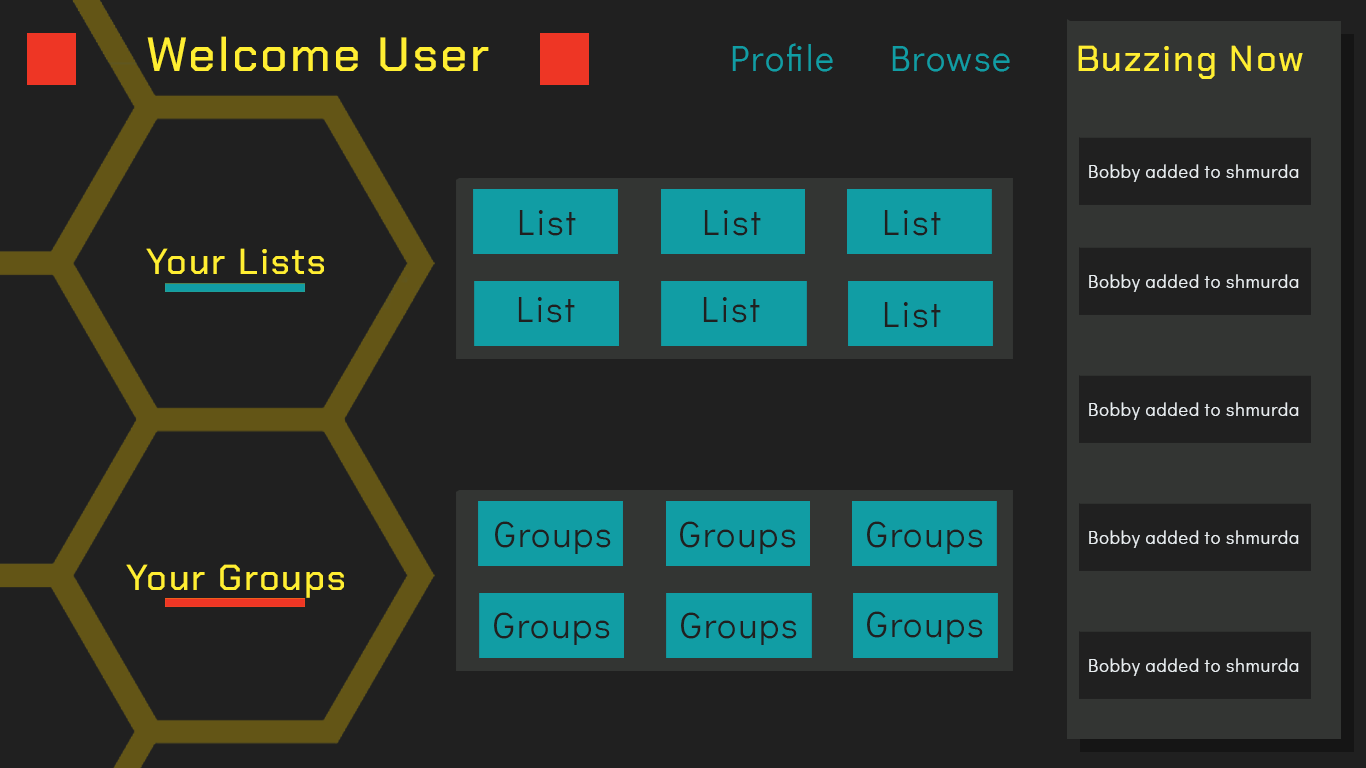
<style>
.page{position:relative;width:1366px;height:768px;background:#202020}
.page>*{position:absolute;margin:0}
.t1{font:48px "ChakraPetch-Medium";letter-spacing:0.05em;color:#ffee32}
.t2{font:36px "DidactGothic-Regular";letter-spacing:0.05em;color:#119da4}
.t3{font:36px "ChakraPetch-Medium";letter-spacing:0.05em;color:#ffee32}
.t4{font:18px "DidactGothic-Regular";letter-spacing:0.05em;color:#e7ecef}
.t5{font:36px "DidactGothic-Regular";letter-spacing:0.05em;color:#202020}
</style>
<div class="page">
<p class="t1" style="left:147px;top:36px;width:342px;height:35px">Welcome User</p>
<p class="t2" style="left:732px;top:43px;width:101px;height:29px">Profile</p>
<p class="t2" style="left:892px;top:46px;width:118px;height:26px">Browse</p>
<p class="t3" style="left:1078px;top:45px;width:225px;height:34px">Buzzing Now</p>
<p class="t4" style="left:1089px;top:164px;width:210px;height:18px">Bobby added to shmurda</p>
<p class="t5" style="left:519px;top:210px;width:57px;height:26px">List</p>
<p class="t5" style="left:704px;top:210px;width:57px;height:26px">List</p>
<p class="t5" style="left:884px;top:210px;width:57px;height:26px">List</p>
<p class="t3" style="left:146px;top:248px;width:178px;height:26px">Your Lists</p>
<p class="t4" style="left:1089px;top:274px;width:210px;height:18px">Bobby added to shmurda</p>
<p class="t5" style="left:518px;top:297px;width:57px;height:26px">List</p>
<p class="t5" style="left:703px;top:297px;width:57px;height:26px">List</p>
<p class="t5" style="left:884px;top:302px;width:57px;height:26px">List</p>
<p class="t4" style="left:1089px;top:402px;width:210px;height:18px">Bobby added to shmurda</p>
<p class="t5" style="left:495px;top:521px;width:116px;height:33px">Groups</p>
<p class="t5" style="left:680px;top:521px;width:116px;height:33px">Groups</p>
<p class="t5" style="left:867px;top:521px;width:116px;height:33px">Groups</p>
<p class="t4" style="left:1089px;top:530px;width:210px;height:18px">Bobby added to shmurda</p>
<p class="t3" style="left:126px;top:564px;width:218px;height:34px">Your Groups</p>
<p class="t5" style="left:494px;top:612px;width:116px;height:33px">Groups</p>
<p class="t5" style="left:681px;top:612px;width:116px;height:33px">Groups</p>
<p class="t5" style="left:867px;top:611px;width:116px;height:33px">Groups</p>
<p class="t4" style="left:1089px;top:658px;width:210px;height:18px">Bobby added to shmurda</p>
</div>
